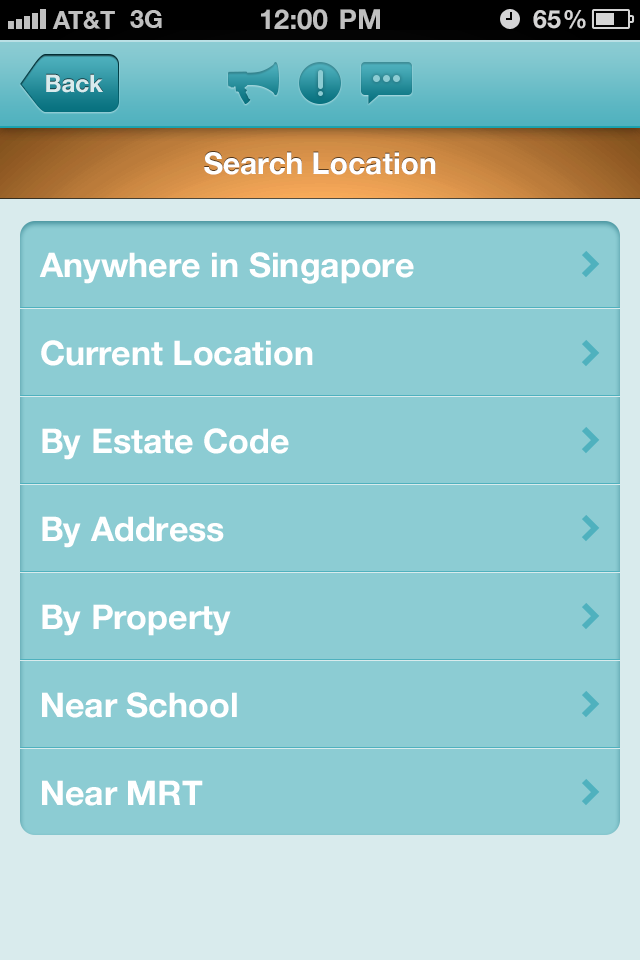
<style>
.page{position:relative;width:640px;height:960px;background:#8cccd3}
.page>*{position:absolute;margin:0}
.t1{font:24px "HelveticaNeueLTCom-Bd";color:#d9ebed}
.t2{font:30px "HelveticaNeueLTCom-Bd";color:#ffffff}
.t3{font:34px/88px "HelveticaNeueLTCom-Bd";color:#ffffff}
</style>
<div class="page">
<p class="t1" style="left:46px;top:74px;width:57px;height:19px">Back</p>
<p class="t2" style="left:204px;top:152px;width:232px;height:23px">Search Location</p>
<p class="t3" style="left:39px;top:252px;width:375px;height:554px">Anywhere in Singapore<br>Current Location<br>By Estate Code<br>By Address<br>By Property<br>Near School<br>Near MRT</p>
</div>
